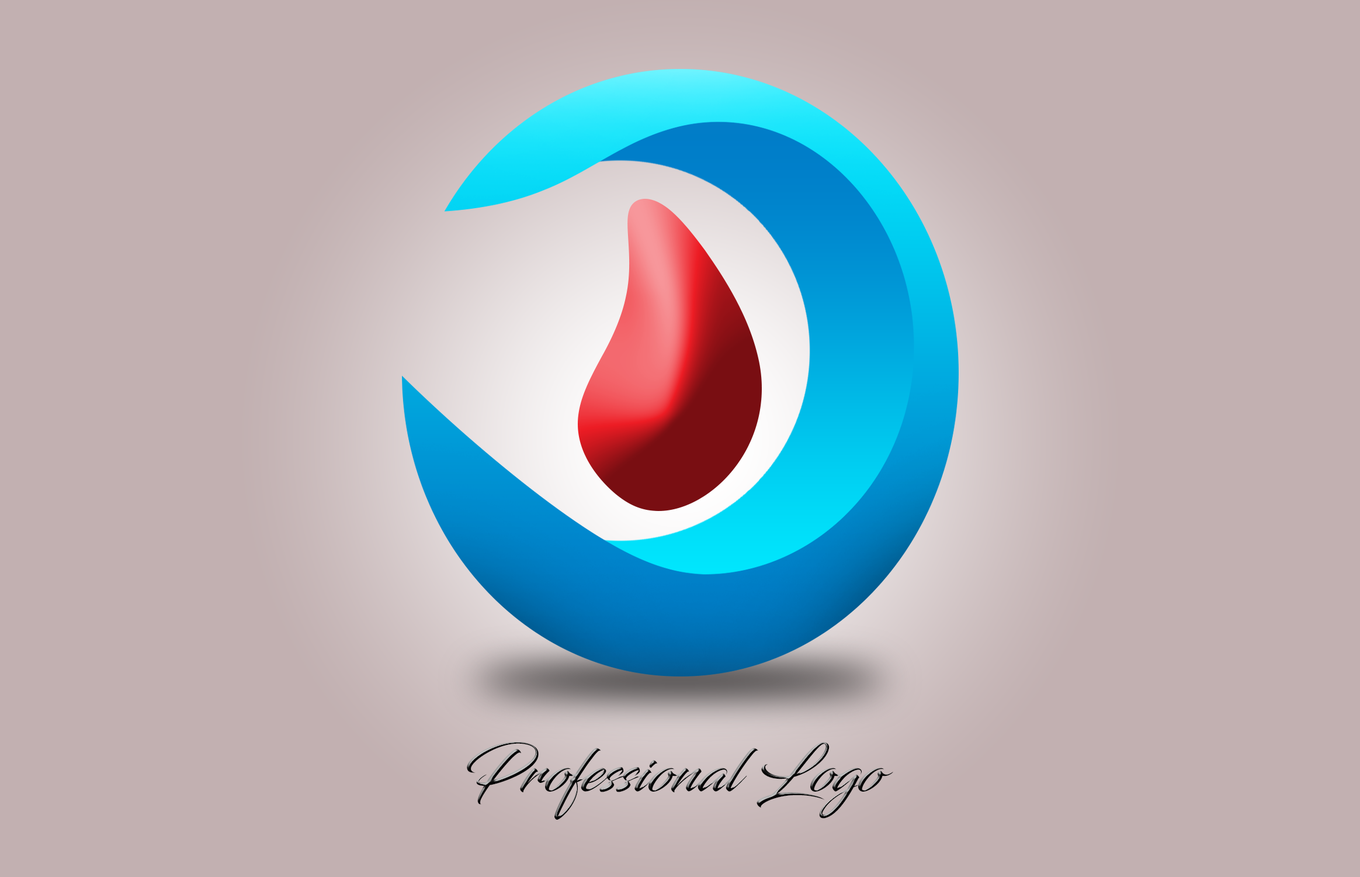
<style>
.page{position:relative;width:1360px;height:877px;background:#c2b0b1}
.page>*{position:absolute;margin:0}
.t1{font:58.4px "Blacksword"}
</style>
<div class="page">
<p class="t1" style="left:467px;top:742px;width:426px;height:77px">Professional Logo</p>
</div>
